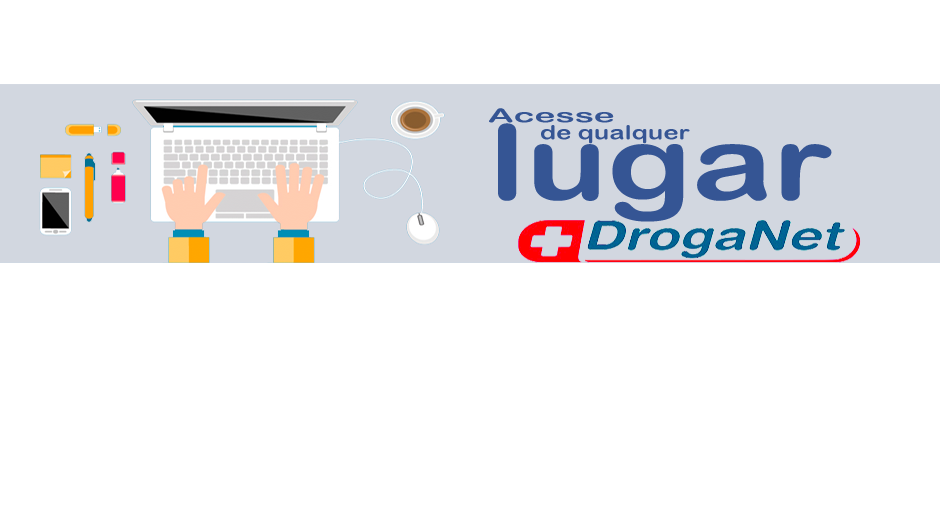
<style>
.page{position:relative;width:940px;height:528px;background:#ffffff}
.page>*{position:absolute;margin:0}
.t1{font:19.2px "ArialRoundedMTBold";color:#355594;scale:1.85 1}
.t2{font:104.3px "ArialRoundedMTBold";color:#355594;scale:1.3 1}
.t3{font:19.5px "ArialRoundedMTBold";color:#355594;scale:1.32 1}
</style>
<div class="page">
<p class="t1" style="left:489px;top:108px;width:125px;height:15px">Acesse</p>
<p class="t2" style="left:498px;top:123px;width:334px;height:99px">lugar</p>
<p class="t3" style="left:541px;top:125px;width:149px;height:19px">de qualquer</p>
</div>
